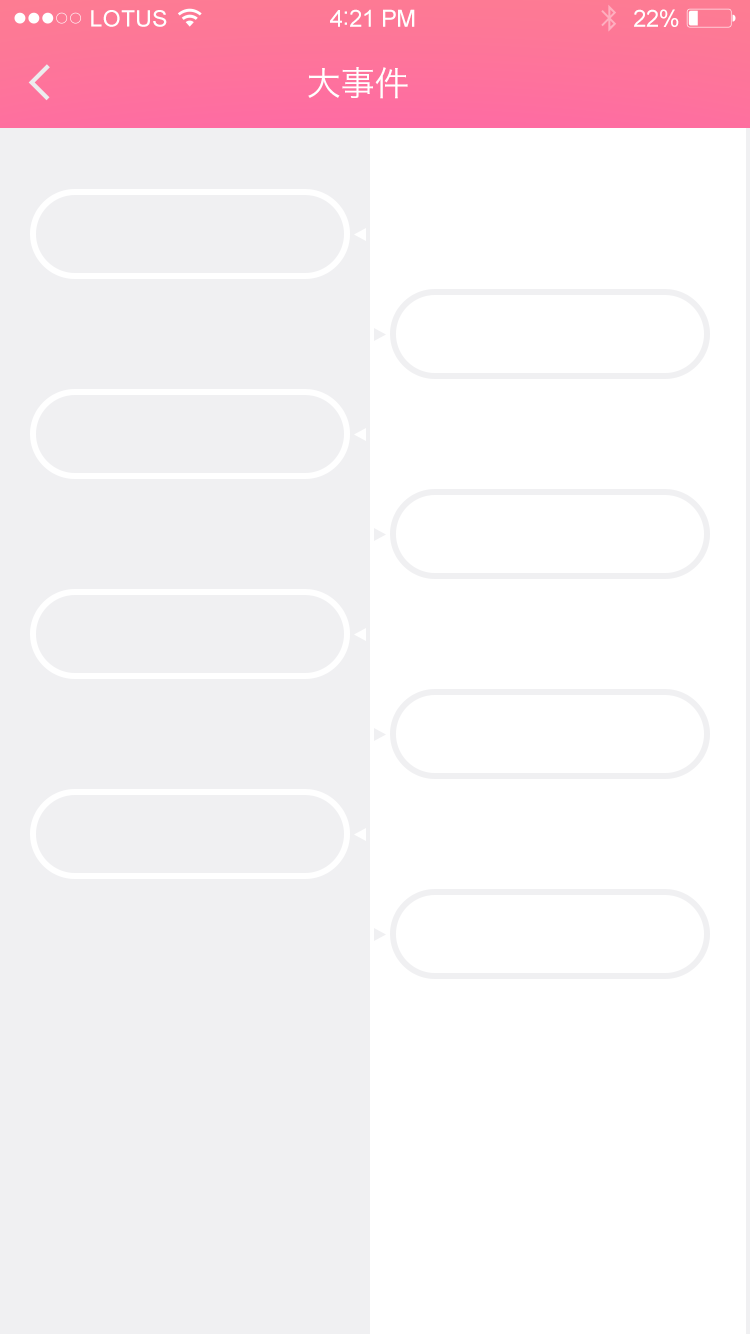
<style>
.page{position:relative;width:750px;height:1334px;background:#ffffff}
.page>*{position:absolute;margin:0}
.t1{font:22.6px "ArialMT";letter-spacing:0.02em;color:#ffffff}
.t2{font:23.6px "ArialMT";letter-spacing:-0.02em;color:#ffffff}
.t3{font:25.6px "ArialMT";letter-spacing:-0.02em;color:#ffffff}
.t4{font:34px "HiraginoSansGB-W3";color:#ffffff}
</style>
<div class="page">
<p class="t1" style="left:91px;top:10px;width:76px;height:17px">LOTUS</p>
<p class="t2" style="left:330px;top:9px;width:85px;height:18px">4<span class="t3">:</span>21 PM</p>
<p class="t2" style="left:634px;top:9px;width:45px;height:18px">22%</p>
<p class="t4" style="left:308px;top:67px;width:100px;height:32px">大事件</p>
</div>
